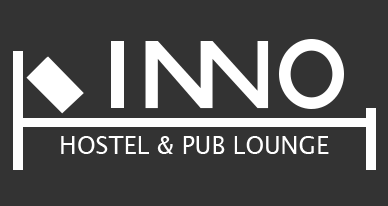
<style>
.page{position:relative;width:388px;height:206px;background:#333333}
.page>*{position:absolute;margin:0}
.t1{font:24px "LucidaSans";color:#ffffff}
</style>
<div class="page">
<p class="t1" style="left:61px;top:136px;width:268px;height:18px">HOSTEL &amp; PUB LOUNGE</p>
</div>
